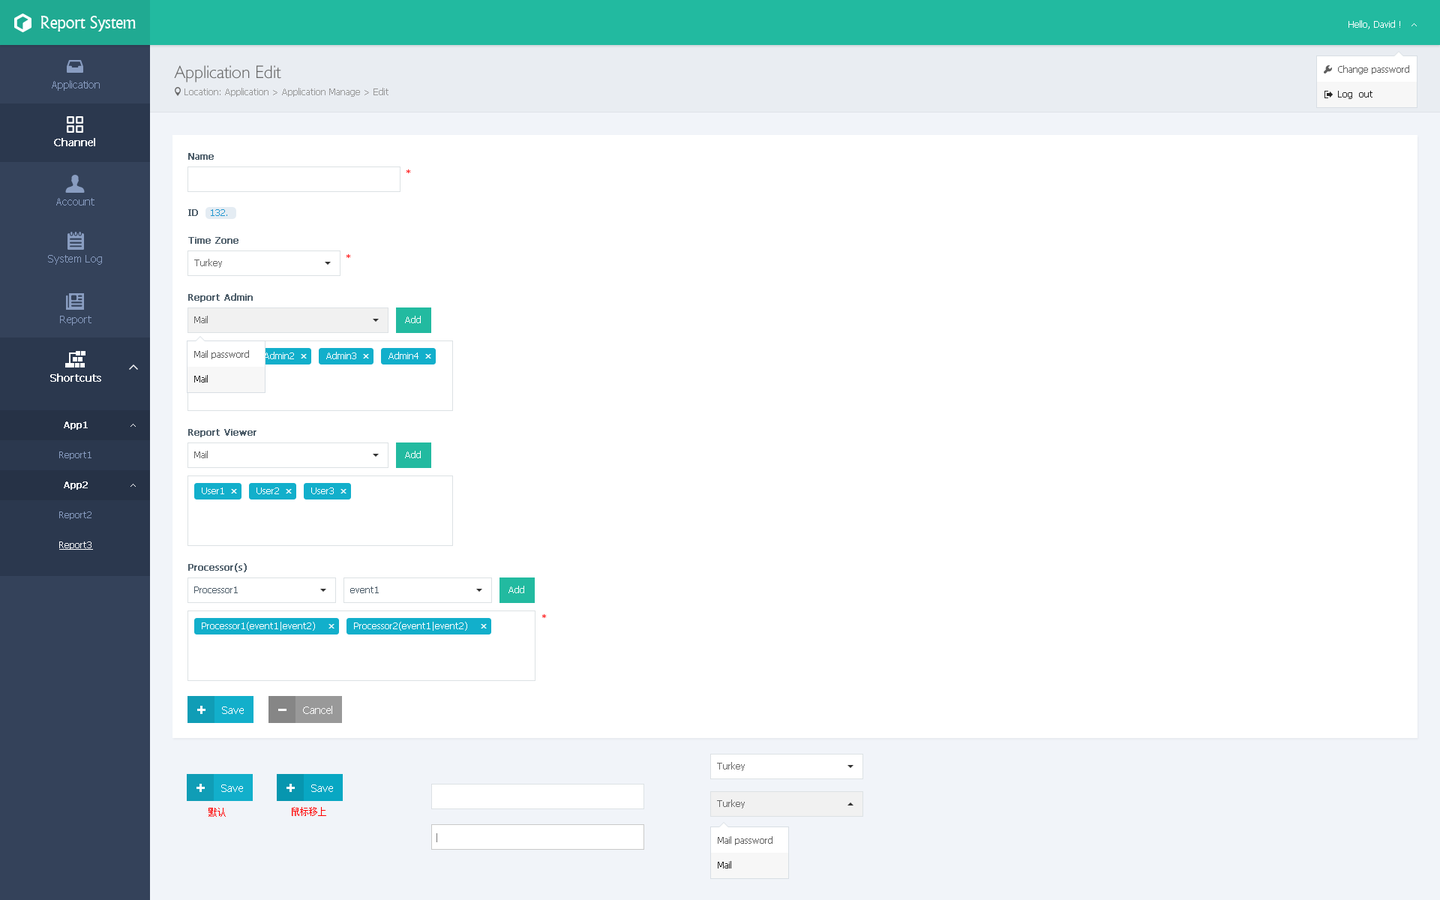
<style>
.page{position:relative;width:1440px;height:900px;background:#ffffff}
.page>*{position:absolute;margin:0}
.t1{font:18px "Narkisim";letter-spacing:-0.022em;color:#ffffff}
.t2{font:9px "Tahoma";color:#ffffff}
.t3{font:18px "084-CAI978";color:#666666}
.t4{font:9px "Tahoma";color:#5f5f5f}
.t5{font:10.5px "Tahoma";color:#899dc1}
.t6{font:9px "Tahoma";color:#999999}
.t7{font:9px "Tahoma";color:#262626}
.t8{font:10.5px "Tahoma";color:#ffffff;font-weight:bold}
.t9{font:9px "Tahoma";color:#4e5e6a;font-weight:bold}
.t10{font:9px "Tahoma";color:#ff0000}
.t11{font:9px "Tahoma";color:#2498d0}
.t12{font:9px "Tahoma";color:#666666}
.t13{font:9px "Tahoma";color:#ffffff;font-weight:bold}
.t14{font:9px "Tahoma";color:#899dc1}
.t15{font:9px "Tahoma";color:#ffffff;text-decoration:underline}
.t16{font:9px "Tahoma";color:#4e5e6a}
.t17{font:10.5px "Tahoma";color:#ffffff}
.t18{font:9px "SimSun";color:#ff0000}
</style>
<div class="page">
<p class="t1" style="left:40px;top:16px;width:96px;height:16px">Report System</p>
<p class="t2" style="left:1348px;top:20px;width:52px;height:9px">Hello, David !</p>
<p class="t3" style="left:174px;top:65px;width:107px;height:17px">Application Edit</p>
<p class="t4" style="left:1338px;top:65px;width:71px;height:9px">Change password</p>
<p class="t5" style="left:52px;top:80px;width:48px;height:11px">Application</p>
<p class="t6" style="left:184px;top:88px;width:204px;height:9px">Location: Application &gt; Application Manage &gt; Edit</p>
<p class="t7" style="left:1338px;top:91px;width:34px;height:8px">Log  out</p>
<p class="t8" style="left:54px;top:138px;width:41px;height:8px">Channel</p>
<p class="t9" style="left:188px;top:153px;width:26px;height:7px">Name</p>
<p class="t10" style="left:406px;top:170px;width:4px;height:3px">*</p>
<p class="t5" style="left:56px;top:198px;width:38px;height:8px">Account</p>
<p class="t9" style="left:188px;top:209px;width:10px;height:7px">ID</p>
<p class="t11" style="left:211px;top:209px;width:16px;height:7px">132.</p>
<p class="t9" style="left:188px;top:237px;width:50px;height:7px">Time Zone</p>
<p class="t5" style="left:48px;top:255px;width:54px;height:10px">System Log</p>
<p class="t10" style="left:346px;top:254px;width:4px;height:4px">*</p>
<p class="t12" style="left:194px;top:259px;width:28px;height:9px">Turkey</p>
<p class="t9" style="left:188px;top:293px;width:65px;height:9px">Report Admin</p>
<p class="t5" style="left:60px;top:316px;width:32px;height:10px">Report</p>
<p class="t12" style="left:194px;top:316px;width:14px;height:7px">Mail</p>
<p class="t2" style="left:405px;top:316px;width:16px;height:7px">Add</p>
<p class="t4" style="left:194px;top:350px;width:55px;height:9px">Mail password</p>
<p class="t2" style="left:264px;top:352px;width:30px;height:7px">Admin2</p>
<p class="t2" style="left:326px;top:352px;width:30px;height:7px">Admin3</p>
<p class="t2" style="left:388px;top:352px;width:30px;height:7px">Admin4</p>
<p class="t8" style="left:50px;top:374px;width:51px;height:8px">Shortcuts</p>
<p class="t7" style="left:194px;top:375px;width:14px;height:7px">Mail</p>
<p class="t13" style="left:64px;top:422px;width:24px;height:8px">App1</p>
<p class="t9" style="left:188px;top:429px;width:68px;height:8px">Report Viewer</p>
<p class="t14" style="left:59px;top:452px;width:33px;height:8px">Report1</p>
<p class="t12" style="left:194px;top:451px;width:14px;height:7px">Mail</p>
<p class="t2" style="left:405px;top:451px;width:16px;height:7px">Add</p>
<p class="t13" style="left:64px;top:482px;width:24px;height:8px">App2</p>
<p class="t2" style="left:202px;top:488px;width:22px;height:6px">User1</p>
<p class="t2" style="left:256px;top:488px;width:23px;height:6px">User2</p>
<p class="t2" style="left:311px;top:488px;width:23px;height:6px">User3</p>
<p class="t14" style="left:59px;top:512px;width:33px;height:8px">Report2</p>
<p class="t15" style="left:59px;top:542px;width:34px;height:8px">Report3</p>
<p class="t9" style="left:188px;top:563px;width:59px;height:9px">Processor(s)</p>
<p class="t16" style="left:194px;top:586px;width:44px;height:7px">Processor1</p>
<p class="t16" style="left:350px;top:586px;width:29px;height:7px">event1</p>
<p class="t2" style="left:508px;top:586px;width:16px;height:7px">Add</p>
<p class="t10" style="left:542px;top:614px;width:4px;height:4px">*</p>
<p class="t2" style="left:202px;top:622px;width:113px;height:9px">Processor1(event1|event2)</p>
<p class="t2" style="left:354px;top:622px;width:113px;height:9px">Processor2(event1|event2)</p>
<p class="t17" style="left:222px;top:706px;width:22px;height:8px">Save</p>
<p class="t17" style="left:303px;top:706px;width:29px;height:8px">Cancel</p>
<p class="t12" style="left:717px;top:762px;width:28px;height:9px">Turkey</p>
<p class="t17" style="left:221px;top:784px;width:22px;height:8px">Save</p>
<p class="t17" style="left:311px;top:784px;width:22px;height:8px">Save</p>
<p class="t18" style="left:208px;top:808px;width:18px;height:9px">默认</p>
<p class="t18" style="left:292px;top:807px;width:34px;height:9px">鼠标移上</p>
<p class="t12" style="left:717px;top:800px;width:28px;height:8px">Turkey</p>
<p class="t4" style="left:718px;top:836px;width:54px;height:9px">Mail password</p>
<p class="t7" style="left:718px;top:861px;width:13px;height:7px">Mail</p>
</div>
